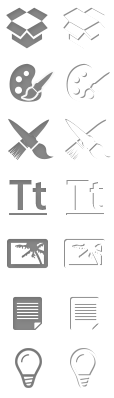
<style>
.page{position:relative;width:114px;height:398px;background:#ffffff}
.page>*{position:absolute;margin:0}
.t1{font:43.6px "MyriadPro-Semibold";color:#7f7f7f;text-transform:uppercase}
.t2{font:43.6px "MyriadPro-Semibold";color:#7f7f7f}
.t3{font:43.6px "MyriadPro-Semibold";color:#ffffff;text-transform:uppercase}
.t4{font:43.6px "MyriadPro-Semibold";color:#ffffff}
</style>
<div class="page">
<p class="t1" style="left:9px;top:180px;width:37px;height:30px">T<span class="t2">t</span></p>
<p class="t3" style="left:66px;top:180px;width:37px;height:30px">T<span class="t4">t</span></p>
</div>
